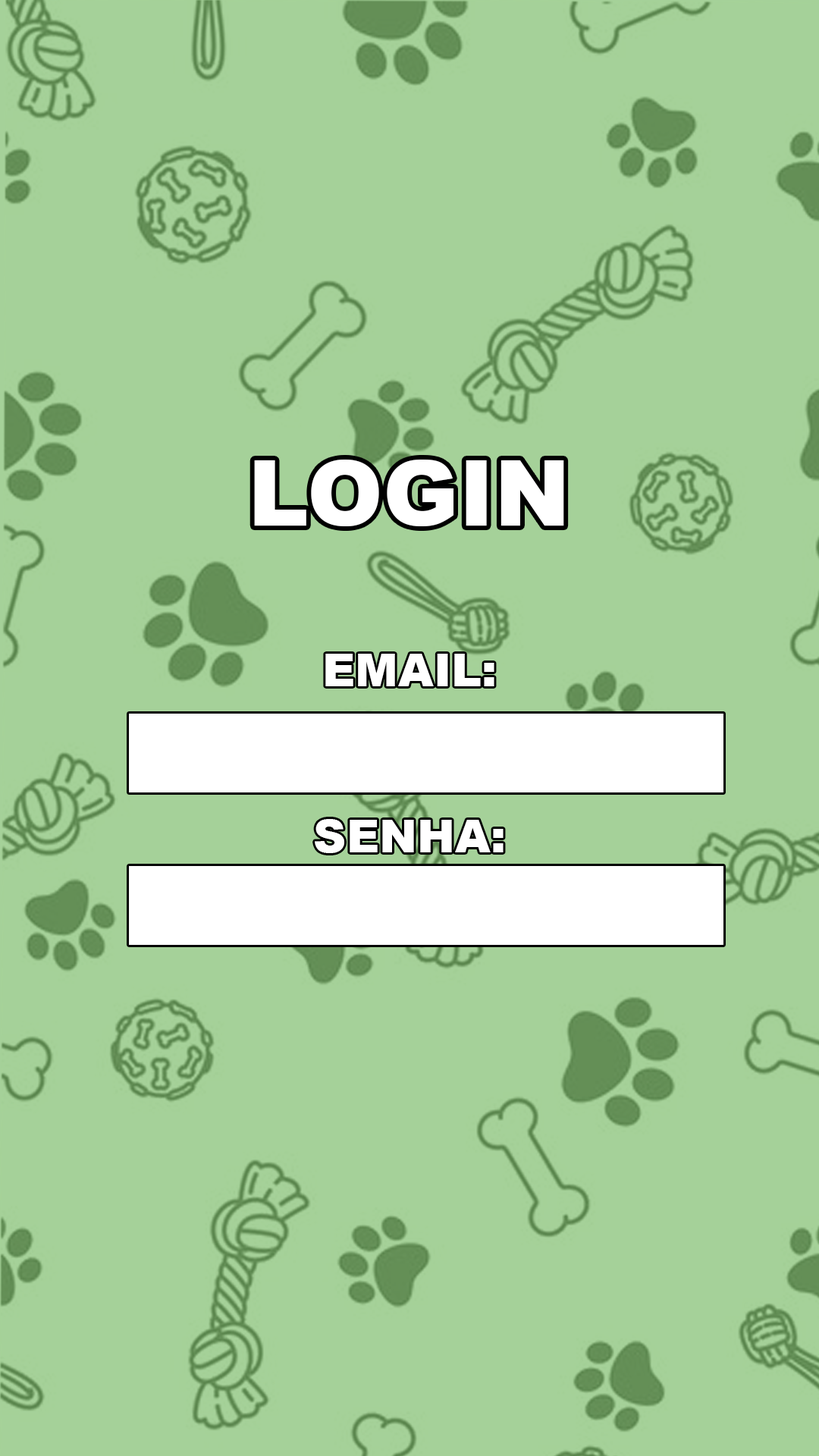
<style>
.page{position:relative;width:819px;height:1456px;background:#a5d199}
.page>*{position:absolute;margin:0}
.t1{font:91px "Arial-Black";color:#ffffff}
.t2{font:45.5px "Arial-Black";color:#ffffff}
</style>
<div class="page">
<p class="t1" style="left:254px;top:460px;width:310px;height:66px">LOGIN</p>
<p class="t2" style="left:325px;top:654px;width:169px;height:32px">EMAIL:</p>
<p class="t2" style="left:315px;top:819px;width:189px;height:34px">SENHA:</p>
</div>
